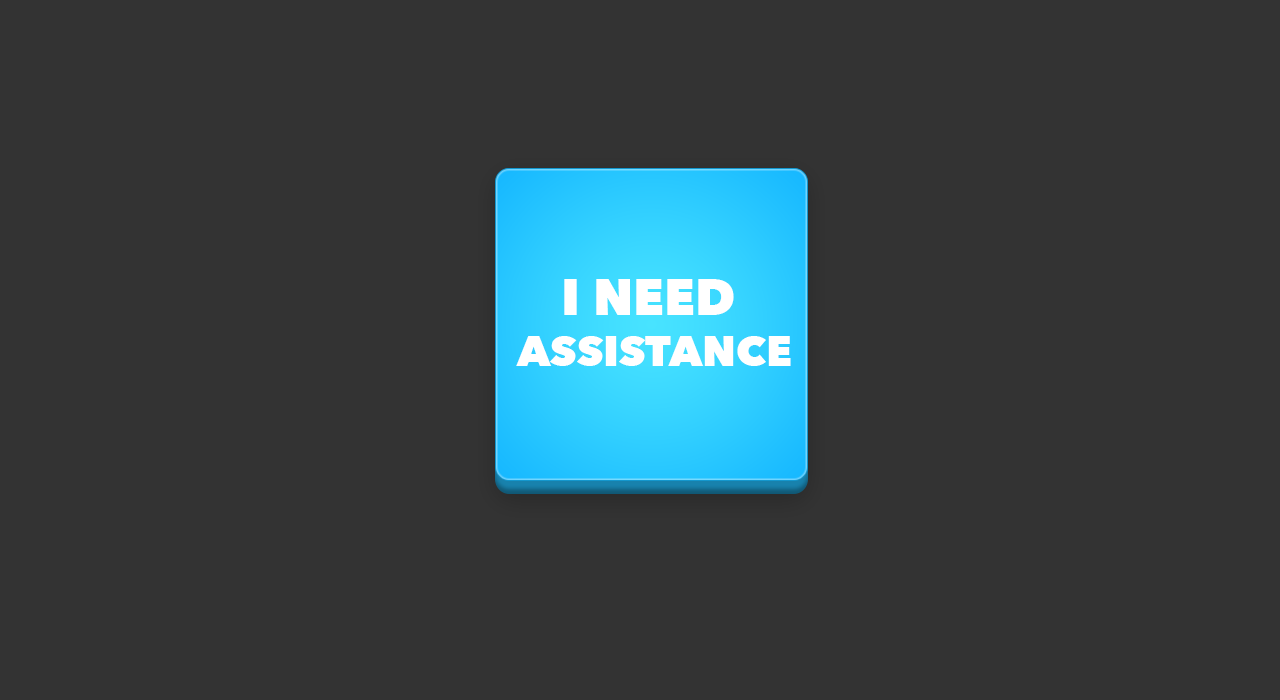
<style>
.page{position:relative;width:1280px;height:700px;background:#333333}
.page>*{position:absolute;margin:0}
.t1{font:43px "AvenirNext-Heavy";color:#ffffff}
.t2{font:51.1px "AvenirNext-Heavy";color:#ffffff}
</style>
<div class="page">
<p class="t1" style="left:516px;top:279px;width:275px;height:87px;text-align:center"><span class="t2">I NEED <br></span>ASSISTANCE</p>
</div>
